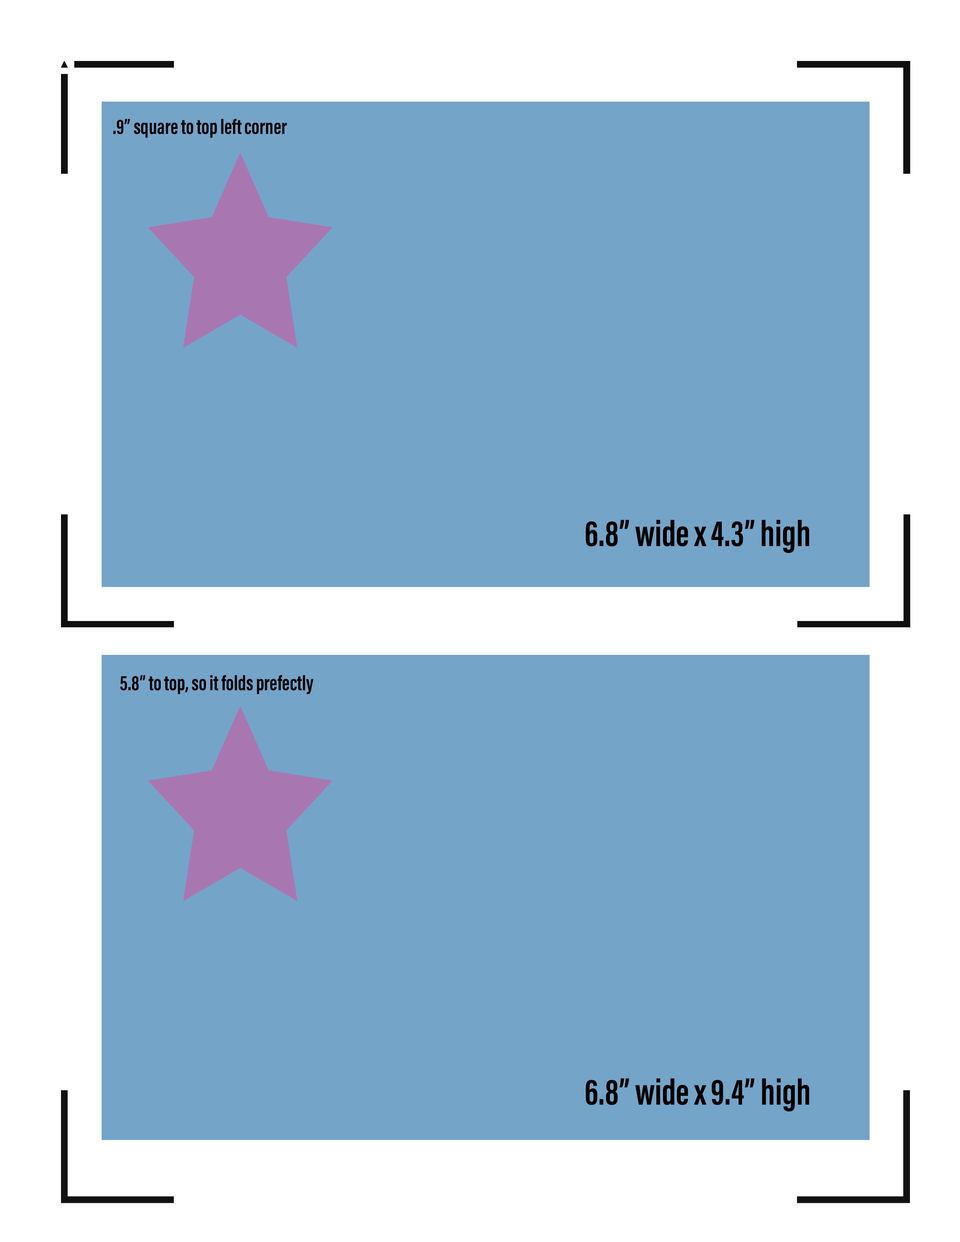
<style>
.page{position:relative;width:960px;height:1242px;background:#75a4c9}
.page>*{position:absolute;margin:0}
.t1{font:21.6px "AcuminConcept-ExtraCondensedBold";color:#000000}
.t2{font:37.6px "AcuminConcept-ExtraCondensedBold";color:#000000}
</style>
<div class="page">
<p class="t1" style="left:113px;top:119px;width:174px;height:19px">.9” square to top left corner</p>
<p class="t2" style="left:586px;top:520px;width:223px;height:33px">6.8” wide x 4.3” high</p>
<p class="t1" style="left:120px;top:675px;width:194px;height:20px">5.8” to top, so it folds prefectly</p>
<p class="t2" style="left:586px;top:1078px;width:223px;height:34px">6.8” wide x 9.4” high</p>
</div>
